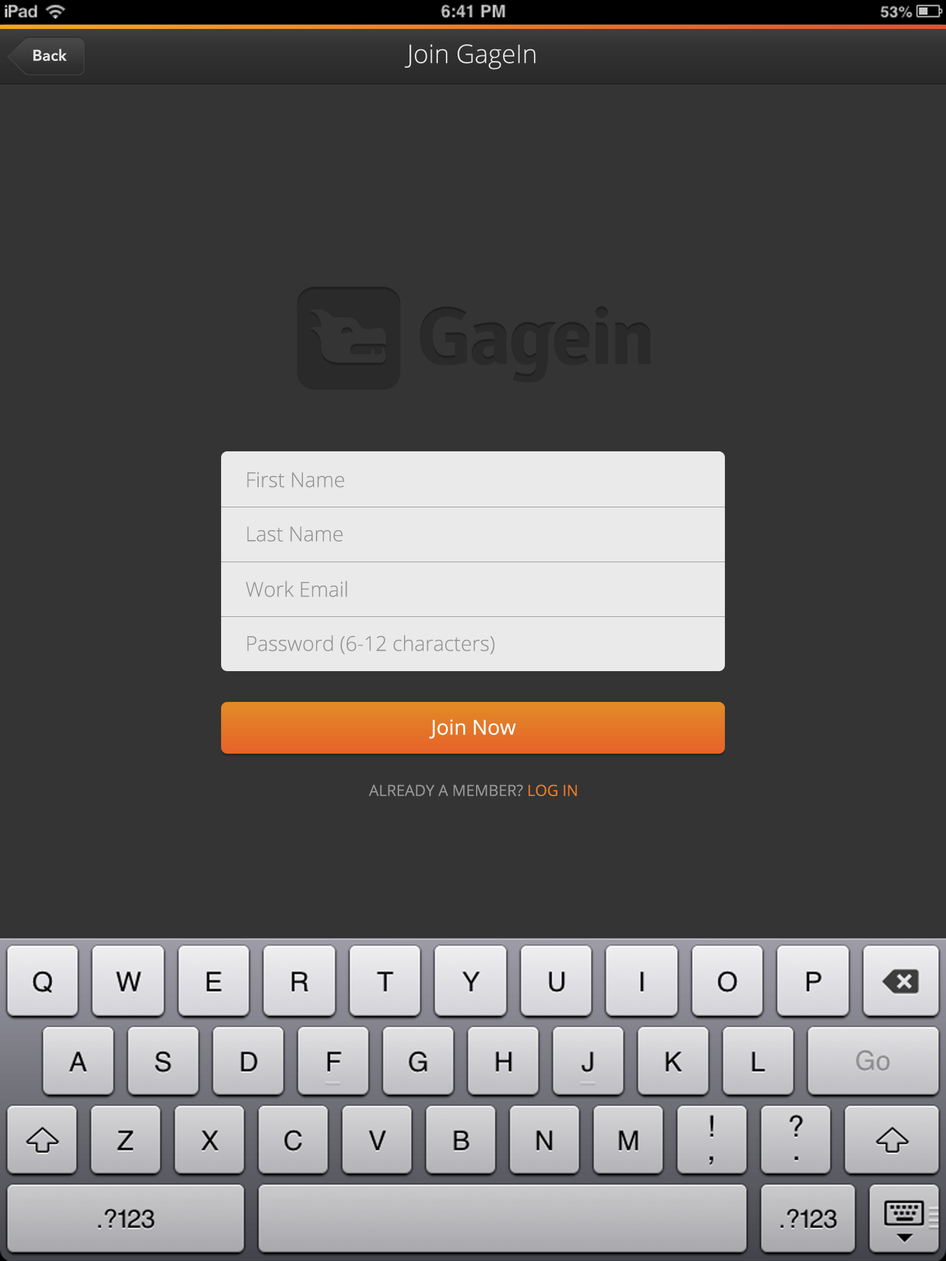
<style>
.page{position:relative;width:946px;height:1261px;background:#343434}
.page>*{position:absolute;margin:0}
.t1{font:15.4px "AvenirNext-DemiBold";color:#e5e5e5}
.t2{font:25.7px "OpenSans-Light";color:#e5e5e5}
.t3{font:20.5px "OpenSans-Light";color:#969696}
.t4{font:20.5px "OpenSans";color:#ffffff}
.t5{font:15.4px "OpenSans";color:#969696}
.t6{font:15.4px "OpenSans";color:#ec7a27}
</style>
<div class="page">
<p class="t1" style="left:33px;top:49px;width:34px;height:12px">Back</p>
<p class="t2" style="left:405px;top:44px;width:131px;height:26px">Join GageIn</p>
<p class="t3" style="left:247px;top:472px;width:97px;height:16px">First Name</p>
<p class="t3" style="left:247px;top:526px;width:96px;height:16px">Last Name</p>
<p class="t3" style="left:246px;top:581px;width:101px;height:16px">Work Email</p>
<p class="t3" style="left:247px;top:635px;width:247px;height:19px">Password (6-12 characters)</p>
<p class="t4" style="left:429px;top:719px;width:87px;height:20px">Join Now</p>
<p class="t5" style="left:369px;top:784px;width:208px;height:13px">ALREADY A MEMBER? <span class="t6">LOG IN</span></p>
</div>
